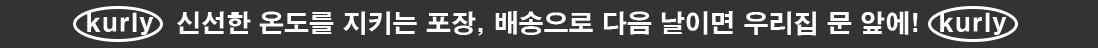
<style>
.page{position:relative;width:1098px;height:48px;background:#333333}
.page>*{position:absolute;margin:0}
.t1{font:25px "HYgtrE";color:#ffffff}
</style>
<div class="page">
<p class="t1" style="left:87px;top:12px;width:67px;height:23px">kurly</p>
<p class="t1" style="left:177px;top:11px;width:741px;height:25px">신선한 온도를 지키는 포장, 배송으로 다음 날이면 우리집 문 앞에!</p>
<p class="t1" style="left:940px;top:12px;width:67px;height:23px">kurly</p>
</div>
